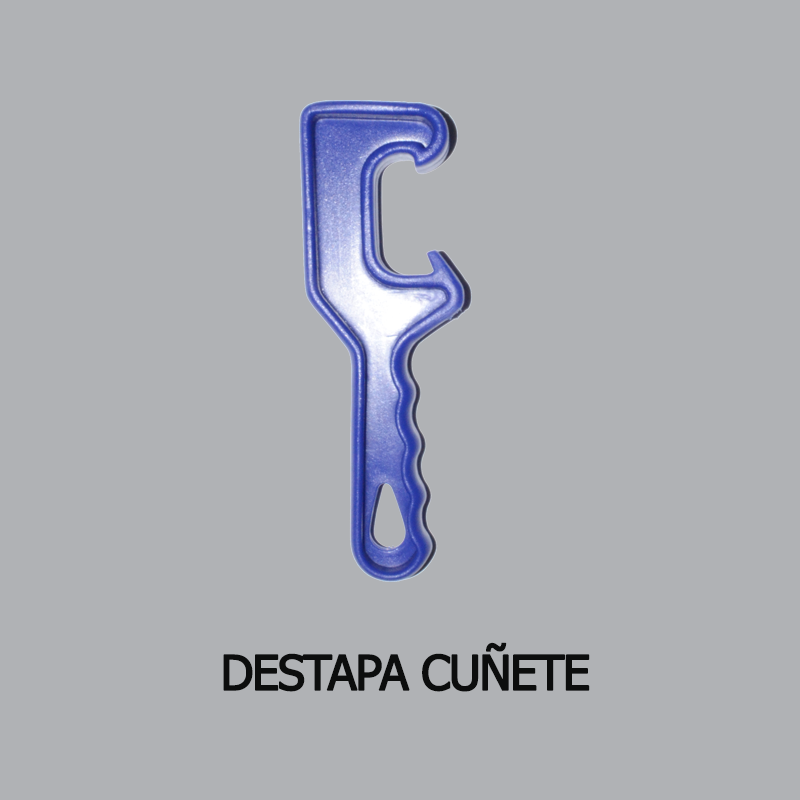
<style>
.page{position:relative;width:800px;height:800px;background:#b0b2b5}
.page>*{position:absolute;margin:0}
.t1{font:48px "Tahoma";letter-spacing:-0.05em;color:#0c0d0d;font-weight:bold}
</style>
<div class="page">
<p class="t1" style="left:223px;top:642px;width:367px;height:50px">DESTAPA CUÑETE</p>
</div>
